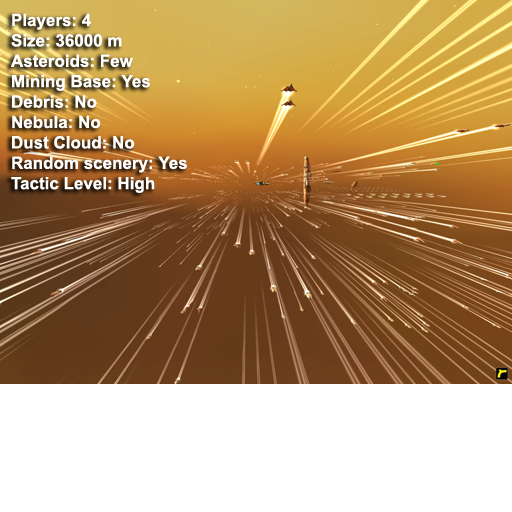
<style>
.page{position:relative;width:512px;height:512px;background:#ffffff}
.page>*{position:absolute;margin:0}
.t1{font:17px "Arial-BoldMT";color:#ffffff}
</style>
<div class="page">
<p class="t1" style="left:11px;top:13px;width:176px;height:180px">Players: 4<br>Size: 36000 m<br>Asteroids: Few<br>Mining Base: Yes<br>Debris: No<br>Nebula: No<br>Dust Cloud: No<br>Random scenery: Yes<br>Tactic Level: High</p>
</div>
